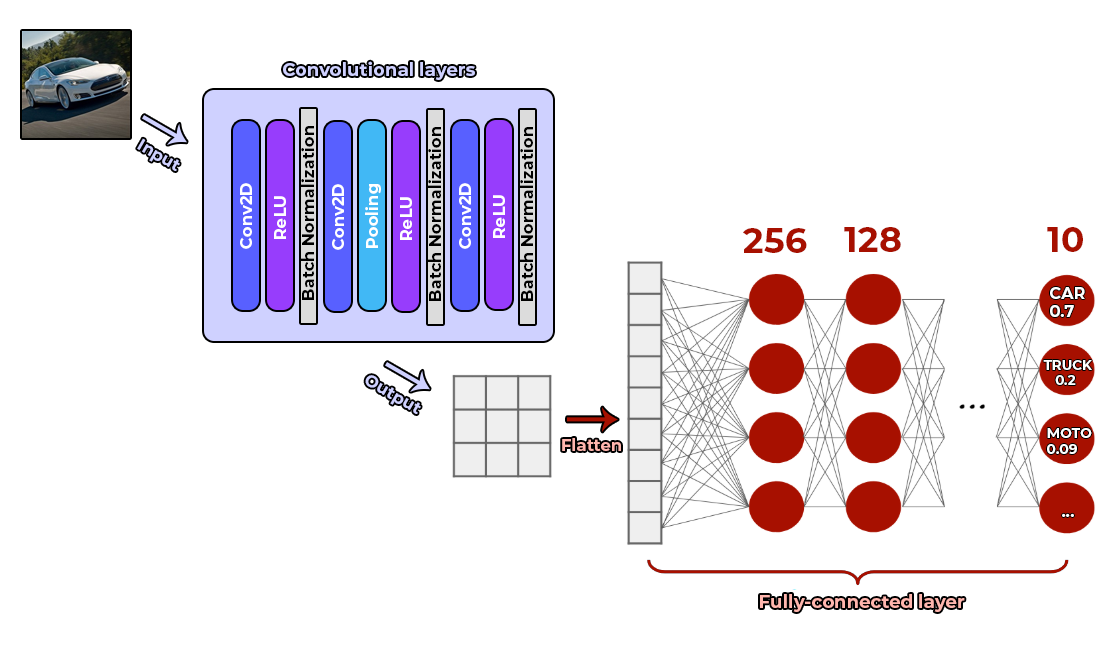
<style>
.page{position:relative;width:1120px;height:653px;background:#ffffff}
.page>*{position:absolute;margin:0}
.t1{font:18.2px "Montserrat-Bold";color:#cfd1ff}
.t2{font:16.3px "Montserrat-Bold";color:#000000}
.t3{font:16.3px "Montserrat-Bold";color:#ffffff}
.t4{font:34.9px "Montserrat-Bold";color:#a71000}
.t5{font:16.2px/6px "Montserrat-Bold";color:#ffffff}
.t6{font:13.5px/5.1px "Montserrat-Bold";color:#ffffff}
.t7{font:16.5px "Montserrat-Bold";color:#ffb6ae}
.t8{font:14px/5.2px "Montserrat-Bold";color:#ffffff}
.t9{font:16.2px "Montserrat-Bold";color:#ffffff}
.t10{font:18.2px "Montserrat-Bold";color:#ffb6ae}
</style>
<div class="page">
<p class="t1" style="left:283px;top:61px;width:192px;height:19px">Convolutional layers</p>
<p class="t2" style="left:301px;top:126px;width:13px;height:174px;rotate:-90deg">Batch Normalization</p>
<p class="t2" style="left:428px;top:127px;width:13px;height:174px;rotate:-90deg">Batch Normalization</p>
<p class="t2" style="left:520px;top:127px;width:13px;height:174px;rotate:-90deg">Batch Normalization</p>
<p class="t3" style="left:240px;top:183px;width:12px;height:66px;rotate:-90deg">Conv2D</p>
<p class="t3" style="left:332px;top:184px;width:12px;height:66px;rotate:-90deg">Conv2D</p>
<p class="t3" style="left:365px;top:184px;width:16px;height:64px;rotate:-90deg">Pooling</p>
<p class="t3" style="left:459px;top:183px;width:12px;height:66px;rotate:-90deg">Conv2D</p>
<p class="t3" style="left:274px;top:196px;width:12px;height:43px;rotate:-90deg">ReLU</p>
<p class="t3" style="left:400px;top:197px;width:12px;height:43px;rotate:-90deg">ReLU</p>
<p class="t3" style="left:493px;top:195px;width:12px;height:43px;rotate:-90deg">ReLU</p>
<p class="t4" style="left:743px;top:228px;width:64px;height:25px">256</p>
<p class="t4" style="left:844px;top:227px;width:57px;height:25px">128</p>
<p class="t4" style="left:1047px;top:227px;width:36px;height:25px">10</p>
<p class="t5" style="left:1050px;top:287px;width:35px;height:30px;text-align:justify">CAR<br><br><br>0.7</p>
<p class="t6" style="left:1043px;top:360px;width:49px;height:25px;text-align:justify">TRUCK<br><br> <br>   0.2</p>
<p class="t7" style="left:562px;top:438px;width:59px;height:13px">Flatten</p>
<p class="t8" style="left:1047px;top:428px;width:45px;height:26px;text-align:justify">MOTO<br><br><br>0.09</p>
<p class="t9" style="left:1062px;top:513px;width:12px;height:4px">...</p>
<p class="t10" style="left:760px;top:594px;width:205px;height:18px">Fully-connected layer</p>
</div>
